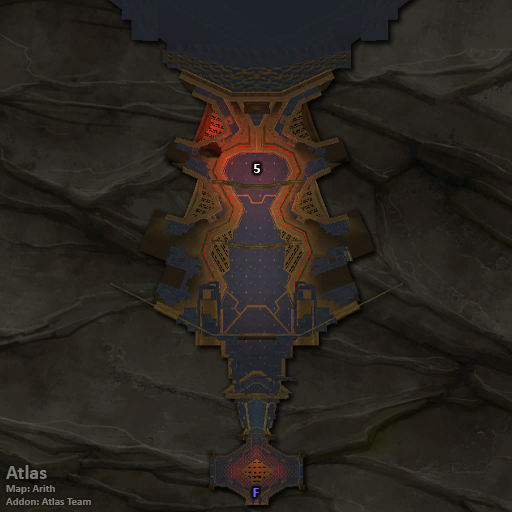
<style>
.page{position:relative;width:512px;height:512px}
.page>*{position:absolute;margin:0}
.t1{font:14px "Calibri-Bold";color:#ffffff}
.t2{font:11px "Calibri-Bold";color:#7d7c7a}
.t3{font:20px "Calibri-Bold";color:#7d7c7a}
.t4{font:14px "Calibri-Bold";color:#6666ff}
</style>
<div class="page">
<p class="t1" style="left:254px;top:164px;width:6px;height:9px">5</p>
<p class="t2" style="left:6px;top:465px;width:85px;height:40px"><span class="t3">Atlas<br></span>Map: Arith<br>Addon: Atlas Team</p>
<p class="t4" style="left:253px;top:488px;width:6px;height:9px">F</p>
</div>
